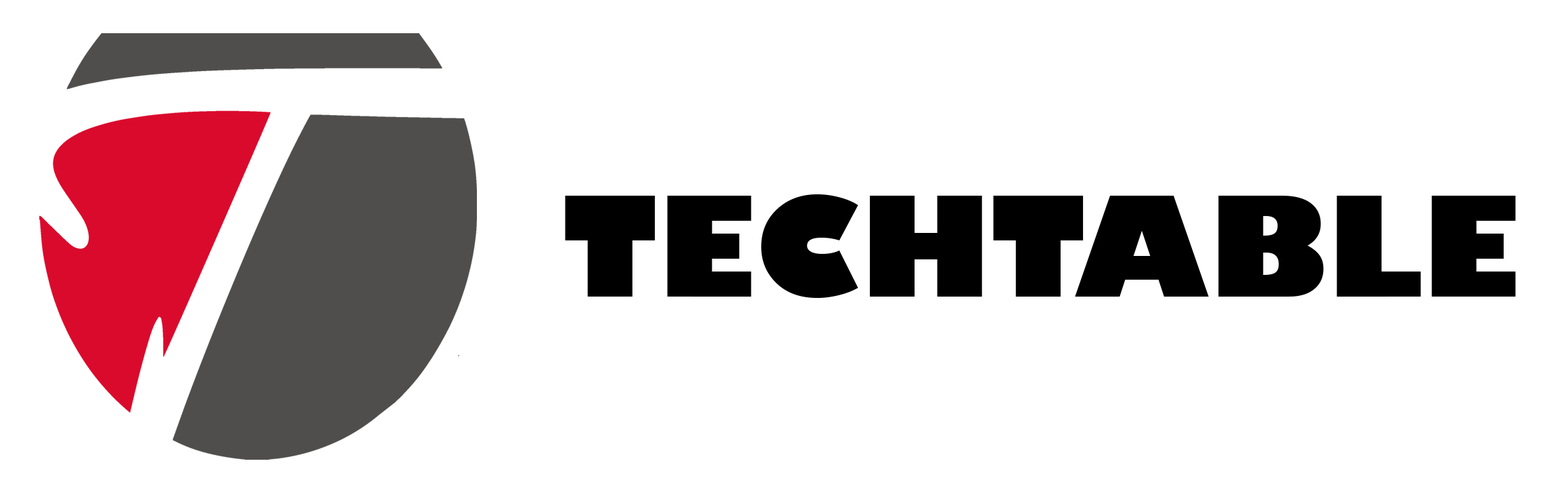
<style>
.page{position:relative;width:1568px;height:497px;background:#ffffff}
.page>*{position:absolute;margin:0}
.t1{font:135.3px "GillSans-UltraBold";color:#000000}
</style>
<div class="page">
<p class="t1" style="left:565px;top:194px;width:951px;height:104px">TECHTABLE</p>
</div>
